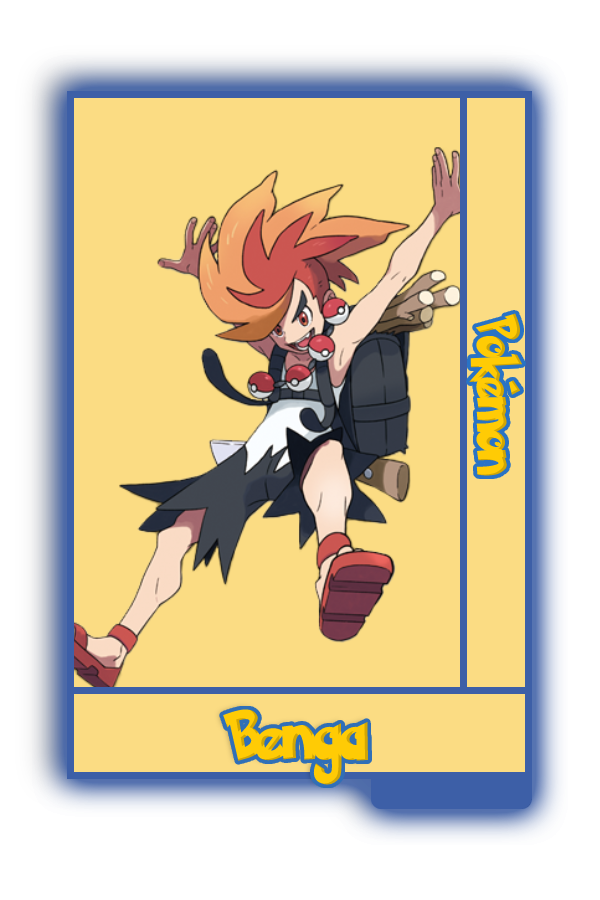
<style>
.page{position:relative;width:600px;height:900px;background:#fbdc83}
.page>*{position:absolute;margin:0}
.t1{font:48.8px "PokemonSolidNormal";color:#ffcb05;scale:0.8 1}
.t2{font:56.6px "PokemonSolidNormal";color:#ffcb05;scale:0.92 1}
</style>
<div class="page">
<p class="t1" style="left:469px;top:313px;width:54px;height:163px;rotate:90deg">Pokémon</p>
<p class="t2" style="left:223px;top:709px;width:146px;height:76px">Benga</p>
</div>
